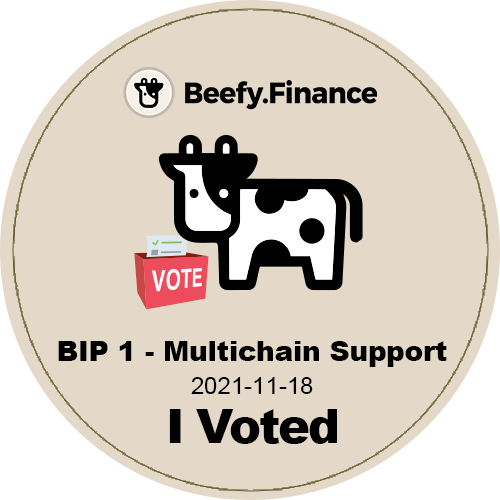
<style>
.page{position:relative;width:500px;height:500px;background:#e4d9c9}
.page>*{position:absolute;margin:0}
.t1{font:28px "Arial-Black";letter-spacing:-0.01em;color:#000000}
.t2{font:24px "ArialMT";color:#000000}
.t3{font:48px "Arial-Black";letter-spacing:-0.05em;color:#000000}
</style>
<div class="page">
<p class="t1" style="left:58px;top:341px;width:389px;height:26px">BIP 1 - Multichain Support</p>
<p class="t2" style="left:191px;top:377px;width:122px;height:17px">2021-11-18</p>
<p class="t3" style="left:169px;top:409px;width:168px;height:35px">I Voted</p>
</div>
